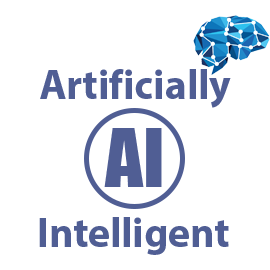
<style>
.page{position:relative;width:270px;height:270px;background:#ffffff}
.page>*{position:absolute;margin:0}
.t1{font:41.7px "MyriadHebrew-Bold";color:#505e94}
.t2{font:75px "Impact";color:#505e94}
</style>
<div class="page">
<p class="t1" style="left:40px;top:69px;width:191px;height:39px">Artificially</p>
<p class="t2" style="left:104px;top:128px;width:58px;height:59px">AI</p>
<p class="t1" style="left:39px;top:217px;width:190px;height:38px">Intelligent</p>
</div>
